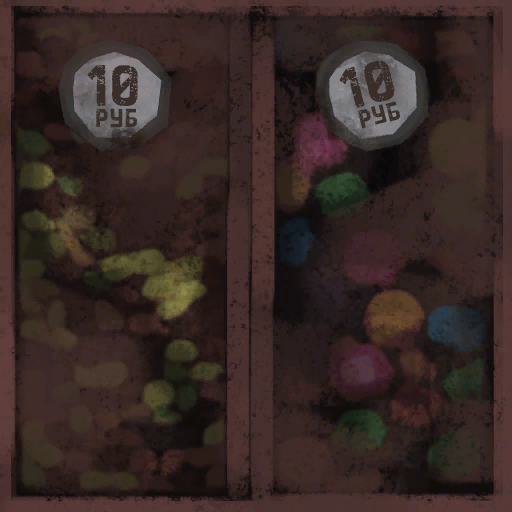
<style>
.page{position:relative;width:512px;height:512px}
.page>*{position:absolute;margin:0}
.t1{font:62.9px "HandelsonSix_CYR-Six";color:#392e2a}
.t2{font:28px "HandelsonSix_CYR-Six";color:#392e2a}
</style>
<div class="page">
<p class="t1" style="left:87px;top:65px;width:51px;height:41px">10</p>
<p class="t1" style="left:339px;top:60px;width:56px;height:48px;rotate:-15deg">10</p>
<p class="t2" style="left:357px;top:101px;width:44px;height:28px;rotate:-15deg">руб</p>
<p class="t2" style="left:96px;top:108px;width:42px;height:20px">руб</p>
</div>
